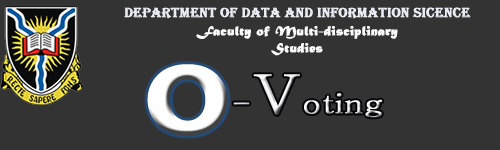
<style>
.page{position:relative;width:500px;height:150px;background:#333333}
.page>*{position:absolute;margin:0}
.t1{font:14px "Algerian";color:#e8ecf2;font-weight:bold}
.t2{font:14px "MaturaMTScriptCapitals";color:#fafafa;font-weight:bold}
.t3{font:98.1px "Rockwell-Bold";color:#ffffff;font-weight:bold;scale:1.04 1}
.t4{font:26.9px "Batang";color:#f8f8f9;font-weight:bold;scale:1.2 1}
.t5{font:26.9px "Batang";color:#dbe0e6;font-weight:bold;scale:1.2 1}
.t6{font:53.8px "Batang";color:#f8f8f9;font-weight:bold;scale:1.2 1}
</style>
<div class="page">
<p class="t1" style="left:124px;top:7px;width:347px;height:12px">Department of Data and Information Sicence</p>
<p class="t2" style="left:196px;top:26px;width:202px;height:30px;text-align:center">Faculty of Multi-disciplinary<br>Studies</p>
<p class="t3" style="left:147px;top:64px;width:81px;height:72px">O</p>
<p class="t4" style="left:233px;top:74px;width:150px;height:44px"><span class="t5">-</span><span class="t6">V</span>oting</p>
</div>
